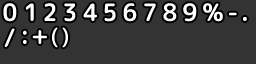
<style>
.page{position:relative;width:256px;height:64px;background:#333333}
.page>*{position:absolute;margin:0}
.t1{font:24px "rounded-x-mgenplus-1c-bold";letter-spacing:0.3em;color:#ffffff;scale:0.96 1}
.t2{font:24px "rounded-x-mgenplus-1c-bold";letter-spacing:0.3em;color:#ffffff}
.t3{font:21px "rounded-x-mgenplus-1c-bold";letter-spacing:0.3em;color:#ffffff;scale:0.92 1}
</style>
<div class="page">
<p class="t1" style="left:3px;top:3px;width:14px;height:19px">0</p>
<p class="t1" style="left:25px;top:3px;width:9px;height:18px">1</p>
<p class="t1" style="left:44px;top:3px;width:12px;height:18px">2</p>
<p class="t1" style="left:64px;top:3px;width:12px;height:19px">3</p>
<p class="t2" style="left:83px;top:3px;width:14px;height:18px">4</p>
<p class="t1" style="left:104px;top:3px;width:12px;height:19px">5</p>
<p class="t1" style="left:123px;top:3px;width:14px;height:19px">6</p>
<p class="t1" style="left:144px;top:3px;width:12px;height:18px">7</p>
<p class="t1" style="left:163px;top:3px;width:14px;height:19px">8</p>
<p class="t2" style="left:183px;top:3px;width:14px;height:19px">9</p>
<p class="t2" style="left:203px;top:3px;width:20px;height:19px">%</p>
<p class="t1" style="left:229px;top:12px;width:8px;height:4px">-</p>
<p class="t2" style="left:243px;top:17px;width:4px;height:4px">.</p>
<p class="t1" style="left:4px;top:28px;width:11px;height:19px">/</p>
<p class="t1" style="left:23px;top:30px;width:4px;height:14px">:</p>
<p class="t2" style="left:32px;top:30px;width:15px;height:14px">+</p>
<p class="t3" style="left:52px;top:27px;width:6px;height:21px">(</p>
<p class="t3" style="left:62px;top:27px;width:6px;height:21px">)</p>
</div>
